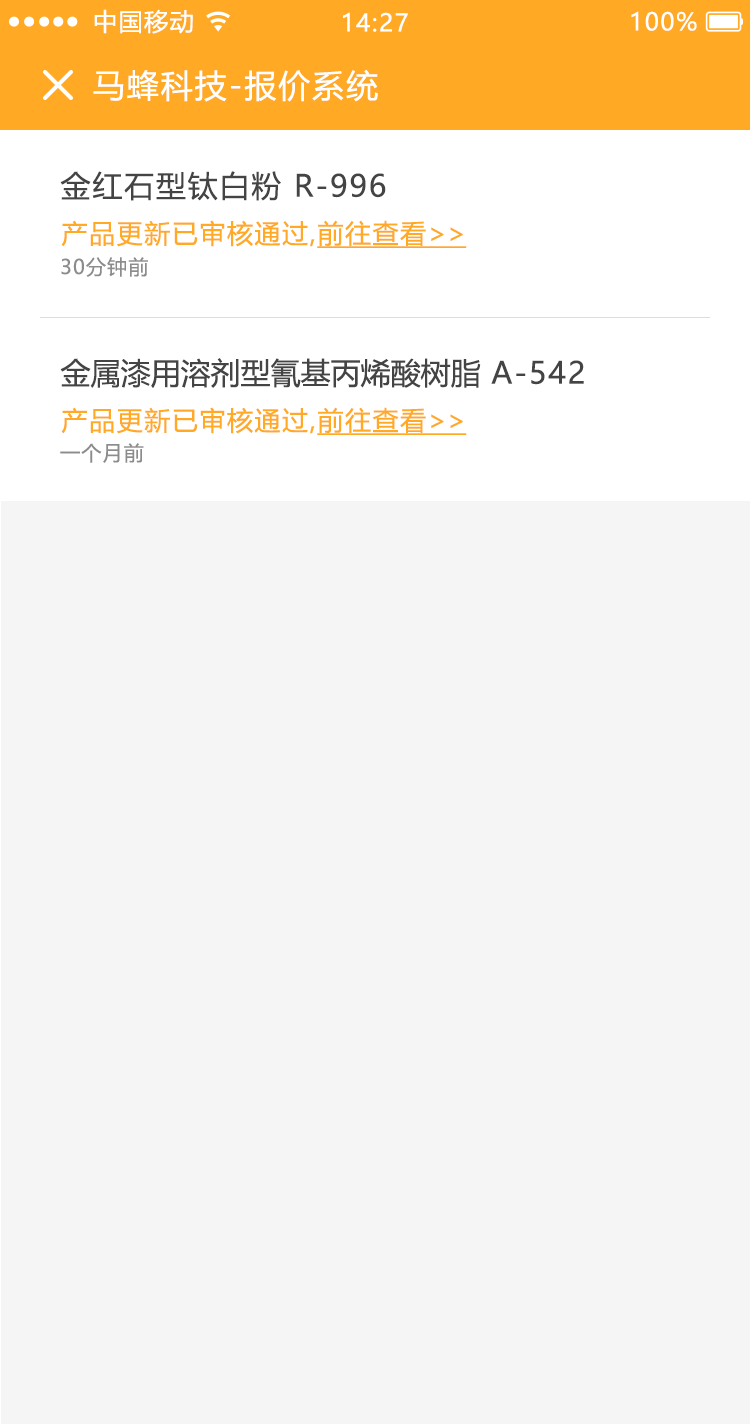
<style>
.page{position:relative;width:750px;height:1424px;background:#f5f5f5}
.page>*{position:absolute;margin:0}
.t1{font:24px "MicrosoftYaHeiUI";letter-spacing:0.06em;color:#ffffff}
.t2{font:32px "MicrosoftYaHeiUI";letter-spacing:0.06em;color:#ffffff}
.t3{font:30px "MicrosoftYaHeiUI";letter-spacing:0.06em;color:#444444}
.t4{font:26px "MicrosoftYaHeiUI";letter-spacing:0.06em;color:#ffa924}
.t5{font:26px "MicrosoftYaHeiUI";letter-spacing:0.06em;color:#ffa924;text-decoration:underline}
.t6{font:26px "MicrosoftYaHeiUI";color:#ffa924;text-decoration:underline}
.t7{font:20px "MicrosoftYaHeiUI";letter-spacing:0.06em;color:#8c8c8c}
.t8{font:30px "MicrosoftYaHeiUI";color:#444444}
</style>
<div class="page">
<p class="t1" style="left:94px;top:9px;width:99px;height:25px">中国移动</p>
<p class="t1" style="left:343px;top:12px;width:65px;height:20px">14:27</p>
<p class="t1" style="left:631px;top:11px;width:66px;height:20px">100%</p>
<p class="t2" style="left:93px;top:69px;width:285px;height:33px">马蜂科技-报价系统</p>
<p class="t3" style="left:60px;top:171px;width:326px;height:30px">金红石型钛白粉 R-996</p>
<p class="t4" style="left:61px;top:220px;width:406px;height:28px">产品更新已审核通过,<span class="t5">前往查看</span><span class="t6">&gt;&gt;</span></p>
<p class="t7" style="left:61px;top:257px;width:87px;height:20px">30分钟前</p>
<p class="t8" style="left:60px;top:358px;width:524px;height:30px">金属漆用溶剂型氰基丙烯酸树脂<span class="t3"> A-542</span></p>
<p class="t4" style="left:61px;top:407px;width:406px;height:28px">产品更新已审核通过,<span class="t5">前往查看</span><span class="t6">&gt;&gt;</span></p>
<p class="t7" style="left:60px;top:443px;width:84px;height:20px">一个月前</p>
</div>
